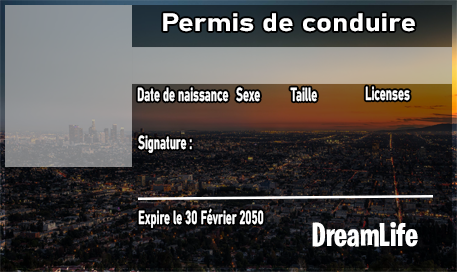
<style>
.page{position:relative;width:457px;height:272px}
.page>*{position:absolute;margin:0}
.t1{font:25px "Bahnschrift-Bold";color:#ffffff;scale:1.18 1}
.t2{font:18.7px "Bahnschrift-Bold";color:#ffffff;scale:0.6 1}
.t3{font:33.3px "BurbankBigCondensed-Bold";color:#ffffff}
</style>
<div class="page">
<p class="t1" style="left:163px;top:13px;width:252px;height:19px">Permis de conduire</p>
<p class="t2" style="left:137px;top:87px;width:92px;height:15px">Date de naissance</p>
<p class="t2" style="left:236px;top:87px;width:24px;height:15px">Sexe</p>
<p class="t2" style="left:290px;top:87px;width:27px;height:15px">Taille</p>
<p class="t2" style="left:365px;top:86px;width:45px;height:15px">Licenses</p>
<p class="t2" style="left:138px;top:135px;width:54px;height:18px">Signature :</p>
<p class="t2" style="left:138px;top:208px;width:126px;height:20px">Expire le 30 Février 2050</p>
<p class="t3" style="left:312px;top:222px;width:106px;height:25px">DreamLife</p>
</div>
